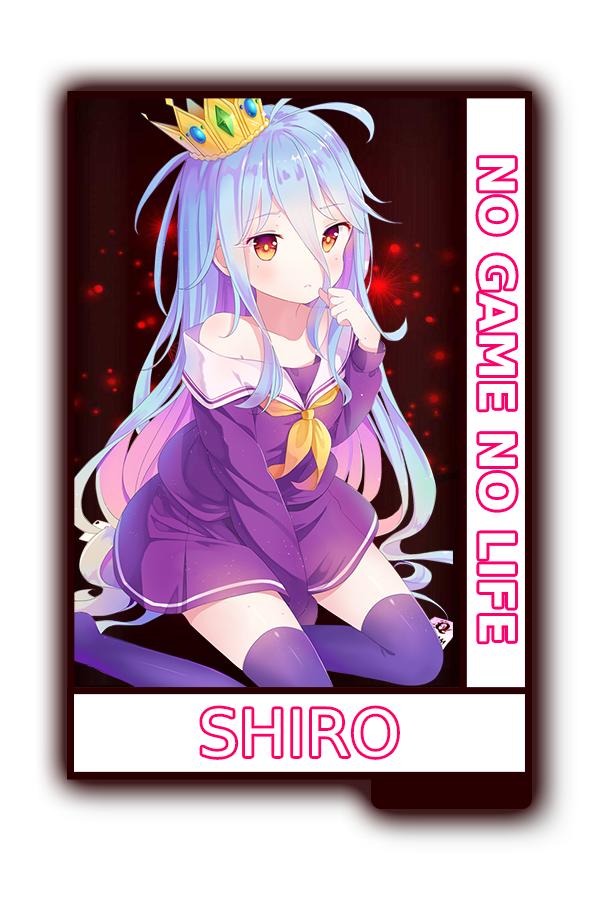
<style>
.page{position:relative;width:600px;height:900px;background:#ffffff}
.page>*{position:absolute;margin:0}
.t1{font:48.8px "MADETOMMY-Bold";color:#ffffff}
.t2{font:64px "CoolveticaRg-Regular";color:#ffffff}
</style>
<div class="page">
<p class="t1" style="left:478px;top:158px;width:38px;height:484px;rotate:90deg">NO GAME NO LIFE</p>
<p class="t2" style="left:202px;top:708px;width:195px;height:49px">SHIRO</p>
</div>
